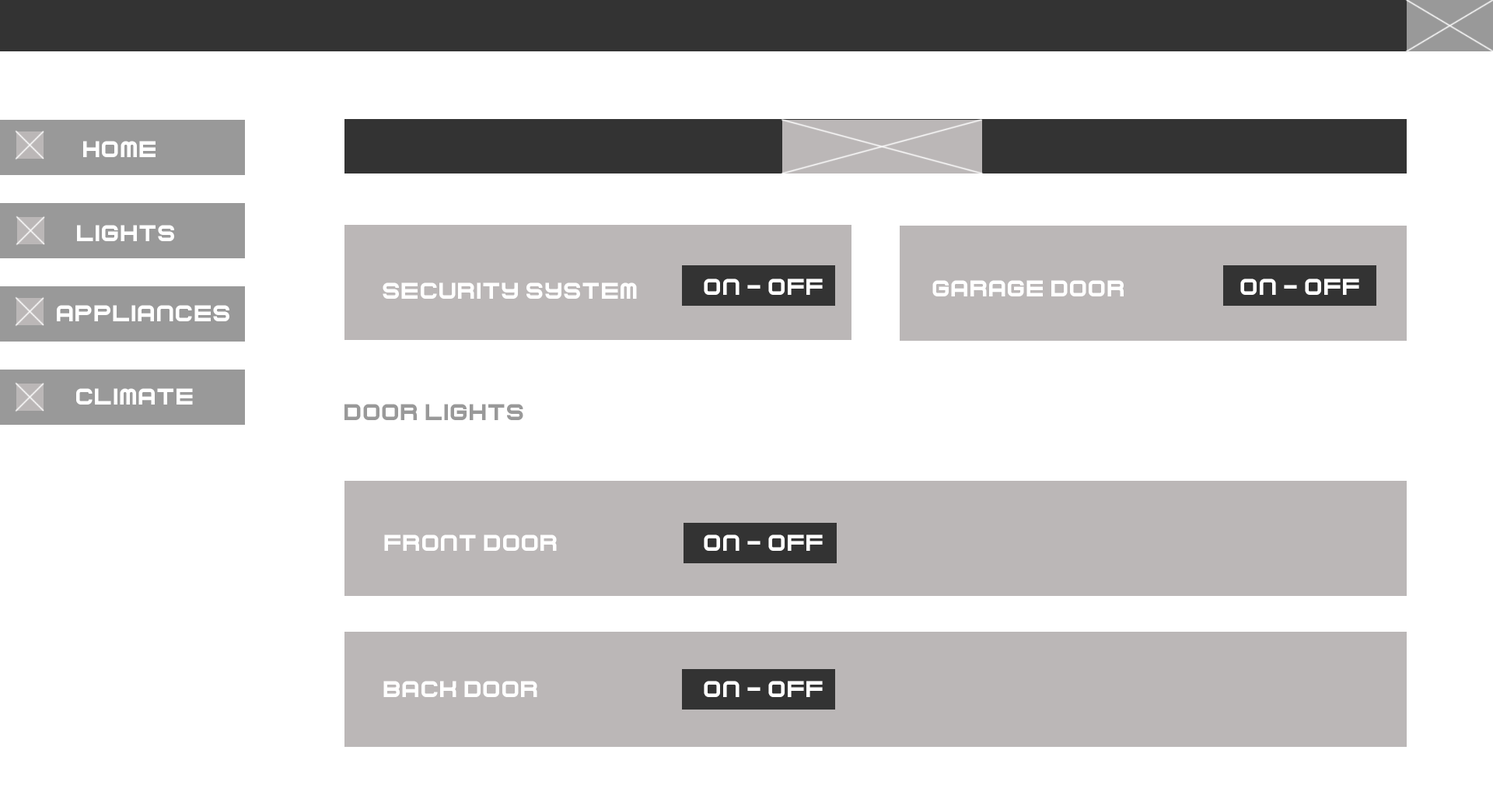
<style>
.page{position:relative;width:1493px;height:799px;background:#ffffff}
.page>*{position:absolute;margin:0}
.t1{font:23.3px "Curvert";color:#ffffff}
.t2{font:23.3px "Curvert";color:#999999}
</style>
<div class="page">
<p class="t1" style="left:83px;top:141px;width:73px;height:16px">Home</p>
<p class="t1" style="left:77px;top:225px;width:97px;height:16px">LIGHTS</p>
<p class="t1" style="left:704px;top:278px;width:119px;height:17px">ON - OFF</p>
<p class="t1" style="left:932px;top:280px;width:192px;height:16px">GARAGE DOOR</p>
<p class="t1" style="left:1240px;top:278px;width:119px;height:17px">ON - OFF</p>
<p class="t1" style="left:383px;top:282px;width:254px;height:17px">Security System</p>
<p class="t1" style="left:57px;top:305px;width:172px;height:16px">APPLIANCES</p>
<p class="t1" style="left:76px;top:388px;width:117px;height:16px">CLIMATE</p>
<p class="t2" style="left:344px;top:404px;width:179px;height:16px">DOOR Lights</p>
<p class="t1" style="left:384px;top:534px;width:173px;height:17px">FRONT DOOR</p>
<p class="t1" style="left:704px;top:534px;width:119px;height:17px">ON - OFF</p>
<p class="t1" style="left:383px;top:680px;width:154px;height:17px">BACK DOOR</p>
<p class="t1" style="left:704px;top:680px;width:119px;height:17px">ON - OFF</p>
</div>
